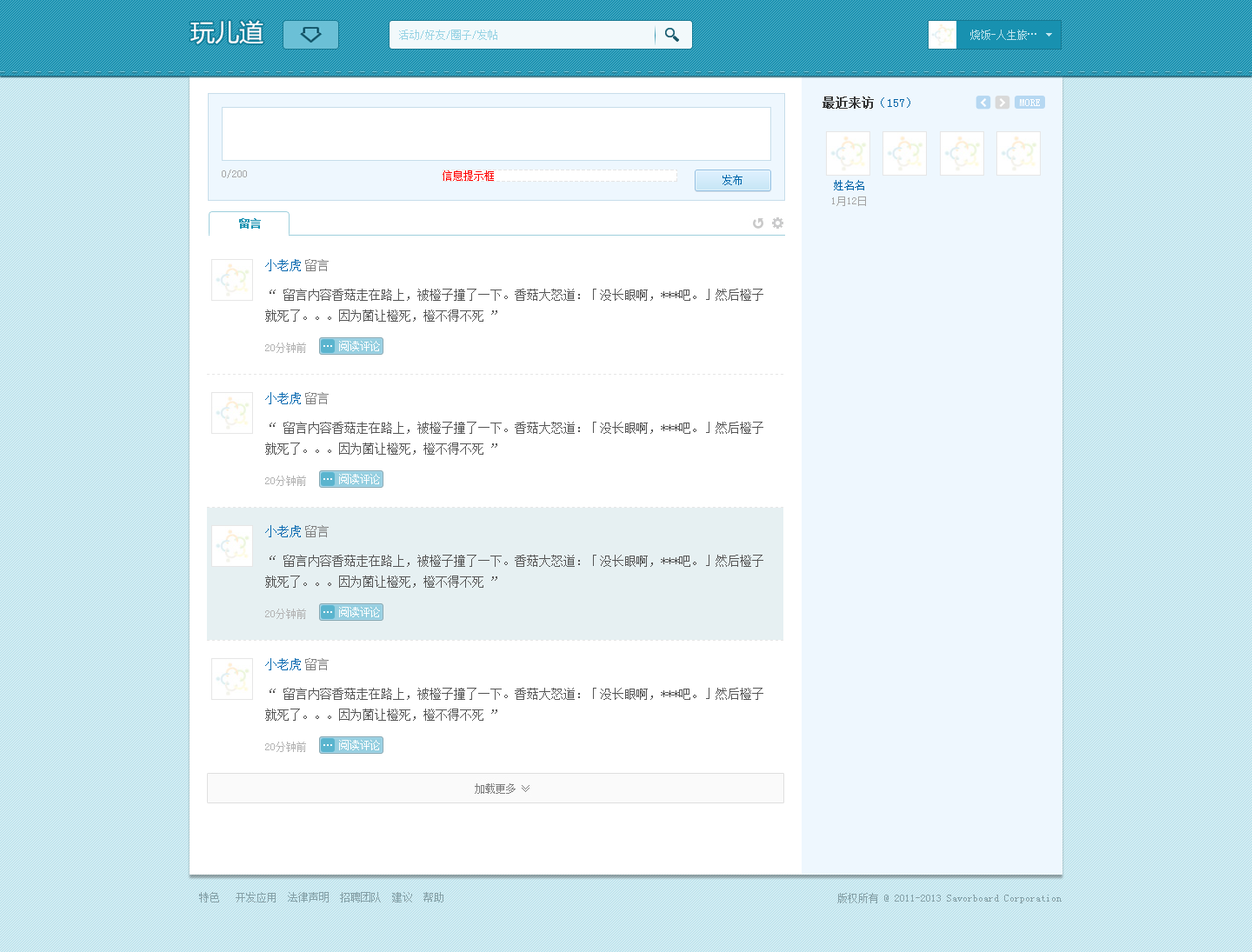
<style>
.page{position:relative;width:1252px;height:952px;background:#ffffff}
.page>*{position:absolute;margin:0}
.t1{font:24.3px "MicrosoftYaHei";color:#ffffff}
.t2{font:10.4px "SimSun";color:#98d3e4}
.t3{font:12.2px "SimSun";color:#0064a8}
.t4{font:12.2px "SimSun";color:#333333;font-weight:bold}
.t5{font:10.4px "SimSun";color:#ffffff}
.t6{font:10.4px "SimSun";color:#a5a5a5}
.t7{font:10.4px "SimSun";color:#ff0101}
.t8{font:10.4px "SimSun";color:#0066ab}
.t9{font:10.4px "SimSun";color:#0064a8}
.t10{font:10.4px "SimSun";color:#1992b1;font-weight:bold}
.t11{font:12.2px "SimSun";color:#0869b0}
.t12{font:12.2px "SimSun";color:#808080}
.t13{font:12.2px/20.9px "SimSun";color:#555555}
.t14{font:10.4px "SimSun";color:#b2b2b2}
.t15{font:10.4px "SimSun";color:#849fa6}
</style>
<div class="page">
<p class="t1" style="left:190px;top:20px;width:73px;height:24px">玩儿道</p>
<p class="t2" style="left:399px;top:30px;width:98px;height:10px">活动/好友/圈子/发帖</p>
<p class="t3" style="left:823px;top:97px;width:87px;height:12px"><span class="t4">最近来访</span>（157）</p>
<p class="t5" style="left:1020px;top:99px;width:20px;height:7px">MORE</p>
<p class="t6" style="left:222px;top:170px;width:25px;height:8px">0/200</p>
<p class="t7" style="left:443px;top:170px;width:51px;height:11px">信息提示框</p>
<p class="t8" style="left:723px;top:175px;width:20px;height:10px">发布</p>
<p class="t9" style="left:834px;top:180px;width:30px;height:10px">姓名名</p>
<p class="t6" style="left:832px;top:197px;width:34px;height:9px">1月12日</p>
<p class="t10" style="left:239px;top:218px;width:22px;height:11px">留言</p>
<p class="t11" style="left:265px;top:259px;width:36px;height:12px">小老虎</p>
<p class="t12" style="left:305px;top:259px;width:24px;height:12px">留言</p>
<p class="t13" style="left:265px;top:289px;width:499px;height:33px">“ 留言内容香菇走在路上，被橙子撞了一下。香菇大怒道：「没长眼啊，***吧。」然后橙子<br>就死了。。。因为菌让橙死，橙不得不死 ”</p>
<p class="t5" style="left:339px;top:341px;width:41px;height:10px">阅读评论</p>
<p class="t14" style="left:265px;top:343px;width:41px;height:10px">20分钟前</p>
<p class="t11" style="left:265px;top:392px;width:36px;height:12px">小老虎</p>
<p class="t12" style="left:305px;top:392px;width:24px;height:12px">留言</p>
<p class="t13" style="left:265px;top:422px;width:499px;height:33px">“ 留言内容香菇走在路上，被橙子撞了一下。香菇大怒道：「没长眼啊，***吧。」然后橙子<br>就死了。。。因为菌让橙死，橙不得不死 ”</p>
<p class="t5" style="left:339px;top:474px;width:41px;height:10px">阅读评论</p>
<p class="t14" style="left:265px;top:476px;width:41px;height:10px">20分钟前</p>
<p class="t11" style="left:265px;top:525px;width:36px;height:12px">小老虎</p>
<p class="t12" style="left:305px;top:525px;width:24px;height:12px">留言</p>
<p class="t13" style="left:265px;top:555px;width:499px;height:33px">“ 留言内容香菇走在路上，被橙子撞了一下。香菇大怒道：「没长眼啊，***吧。」然后橙子<br>就死了。。。因为菌让橙死，橙不得不死 ”</p>
<p class="t14" style="left:265px;top:609px;width:41px;height:10px">20分钟前</p>
<p class="t5" style="left:339px;top:607px;width:41px;height:10px">阅读评论</p>
<p class="t11" style="left:265px;top:658px;width:36px;height:12px">小老虎</p>
<p class="t12" style="left:305px;top:658px;width:24px;height:12px">留言</p>
<p class="t13" style="left:265px;top:688px;width:499px;height:33px">“ 留言内容香菇走在路上，被橙子撞了一下。香菇大怒道：「没长眼啊，***吧。」然后橙子<br>就死了。。。因为菌让橙死，橙不得不死 ”</p>
<p class="t14" style="left:265px;top:742px;width:41px;height:10px">20分钟前</p>
<p class="t5" style="left:339px;top:740px;width:41px;height:10px">阅读评论</p>
<p class="t15" style="left:199px;top:892px;width:245px;height:11px">特色   开发应用  法律声明  招聘团队  建议  帮助</p>
<p class="t15" style="left:837px;top:893px;width:225px;height:11px">版权所有 @ 2011-2013 Savorboard Corporation</p>
</div>
